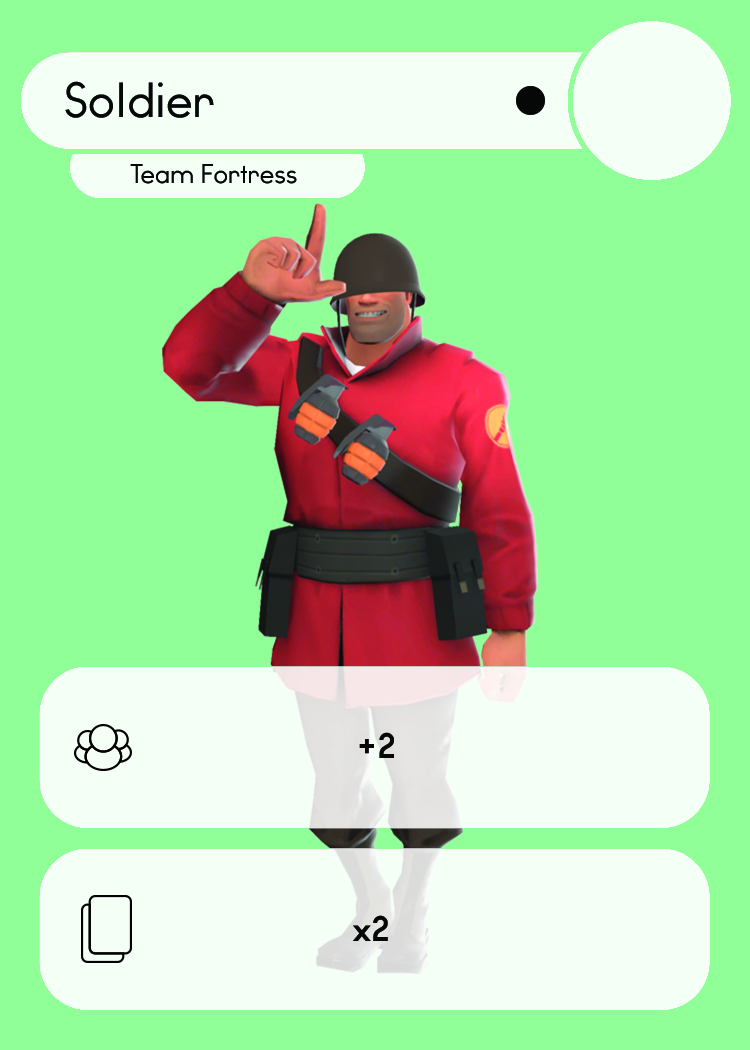
<style>
.page{position:relative;width:750px;height:1050px;background:#91ff97}
.page>*{position:absolute;margin:0}
.t1{font:46.7px "WatchwordRegularDemo";color:#060808}
.t2{font:25.5px "WatchwordRegularDemo";color:#060808}
.t3{font:33.3px "WatchwordBoldDemo";color:#060808}
</style>
<div class="page">
<p class="t1" style="left:65px;top:81px;width:149px;height:37px">Soldier</p>
<p class="t2" style="left:130px;top:164px;width:167px;height:20px">Team Fortress</p>
<p class="t3" style="left:359px;top:732px;width:35px;height:26px">+2</p>
<p class="t3" style="left:353px;top:915px;width:35px;height:26px">x2</p>
</div>
